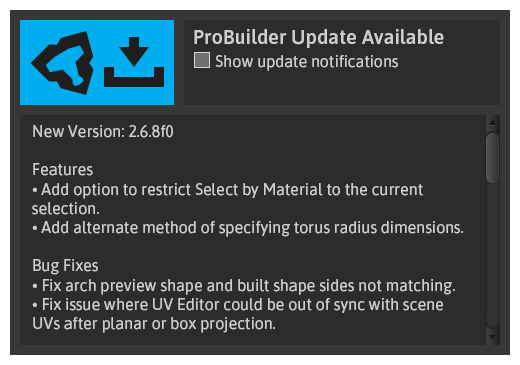
<style>
.page{position:relative;width:520px;height:365px;background:#2c2c2c}
.page>*{position:absolute;margin:0}
.t1{font:20px "Asap-Medium";color:#cecece}
.t2{font:16px "Asap-Regular";color:#cecece}
</style>
<div class="page">
<p class="t1" style="left:194px;top:29px;width:250px;height:19px">ProBuilder Update Available</p>
<p class="t2" style="left:215px;top:55px;width:183px;height:16px">Show update notifications</p>
<p class="t2" style="left:32px;top:125px;width:431px;height:208px">New Version: 2.6.8f0<br><br>Features<br>• Add option to restrict Select by Material to the current selection.<br>• Add alternate method of specifying torus radius dimensions.<br><br>Bug Fixes<br>• Fix arch preview shape and built shape sides not matching.<br>• Fix issue where UV Editor could be out of sync with scene UVs after planar or box projection.<br>• Don't fail face or vertex picking when the required materials aren't found.<br>Whenever a prefab change is detected rebuild the mesh.<br>Fix null reference when attempting to bevel open edges.<br>Remove unused and buggy Debug UVs shader.</p>
</div>
